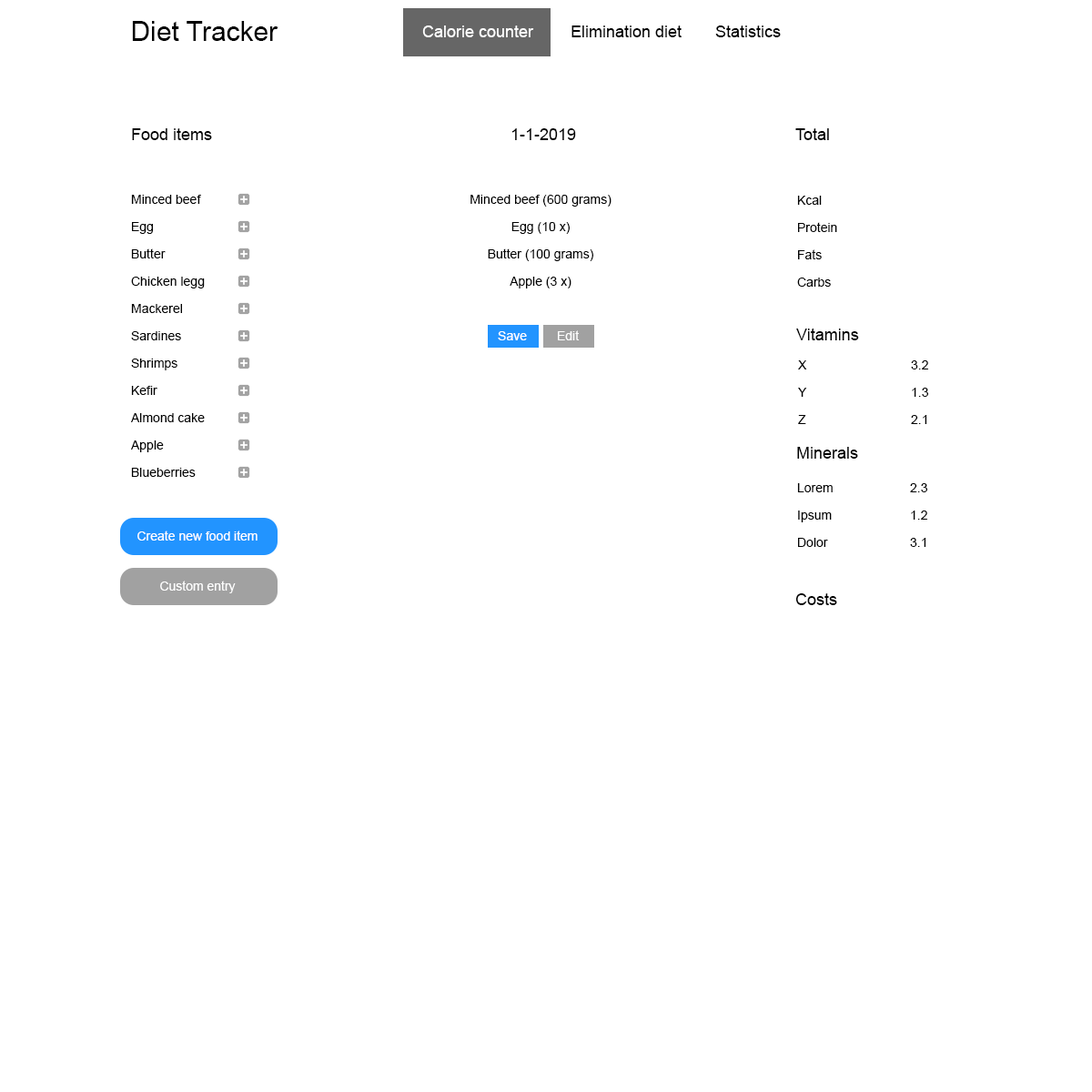
<style>
.page{position:relative;width:1092px;height:1092px;background:#ffffff}
.page>*{position:absolute;margin:0}
.t1{font:27.3px "ArialMT";color:#000000}
.t2{font:16.4px "ArialMT";color:#ffffff}
.t3{font:16.4px "ArialMT";color:#000000}
.t4{font:12.7px/27.3px "ArialMT";color:#000000}
.t5{font:12.7px "ArialMT";color:#ffffff}
</style>
<div class="page">
<p class="t1" style="left:132px;top:21px;width:146px;height:20px">Diet Tracker</p>
<p class="t2" style="left:422px;top:25px;width:112px;height:12px">Calorie counter</p>
<p class="t3" style="left:571px;top:25px;width:111px;height:12px">Elimination diet</p>
<p class="t3" style="left:715px;top:25px;width:66px;height:12px">Statistics</p>
<p class="t3" style="left:132px;top:128px;width:80px;height:12px">Food items</p>
<p class="t3" style="left:511px;top:128px;width:65px;height:12px">1-1-2019</p>
<p class="t3" style="left:795px;top:128px;width:34px;height:12px">Total</p>
<p class="t4" style="left:131px;top:195px;width:74px;height:282px">Minced beef<br>Egg<br>Butter<br>Chicken legg<br>Mackerel<br>Sardines<br>Shrimps<br>Kefir<br>Almond cake<br>Apple<br>Blueberries</p>
<p class="t4" style="left:470px;top:195px;width:142px;height:93px;text-align:center">Minced beef (600 grams)<br>Egg (10 x)<br>Butter (100 grams)<br>Apple (3 x)</p>
<p class="t4" style="left:797px;top:196px;width:40px;height:91px">Kcal<br>Protein<br>Fats<br>Carbs</p>
<p class="t3" style="left:796px;top:329px;width:63px;height:11px">Vitamins</p>
<p class="t5" style="left:498px;top:331px;width:29px;height:9px">Save</p>
<p class="t5" style="left:558px;top:330px;width:22px;height:10px">Edit</p>
<p class="t4" style="left:798px;top:360px;width:9px;height:64px">X<br>Y<br>Z</p>
<p class="t4" style="left:911px;top:360px;width:17px;height:64px">3.2<br>1.3<br>2.1</p>
<p class="t3" style="left:797px;top:447px;width:61px;height:12px">Minerals</p>
<p class="t4" style="left:797px;top:483px;width:36px;height:64px">Lorem<br>Ipsum<br>Dolor</p>
<p class="t4" style="left:910px;top:483px;width:17px;height:64px">2.3<br>1.2<br>3.1</p>
<p class="t5" style="left:137px;top:531px;width:121px;height:10px">Create new food item</p>
<p class="t5" style="left:160px;top:581px;width:76px;height:12px">Custom entry</p>
<p class="t3" style="left:795px;top:593px;width:42px;height:12px">Costs</p>
</div>
